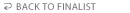
<style>
.page{position:relative;width:130px;height:13px;background:#ffffff}
.page>*{position:absolute;margin:0}
.t1{font:10px "MyriadPro-Regular";letter-spacing:0.025em;color:#787576}
</style>
<div class="page">
<p class="t1" style="left:16px;top:3px;width:80px;height:7px">BACK TO FINALIST</p>
</div>
